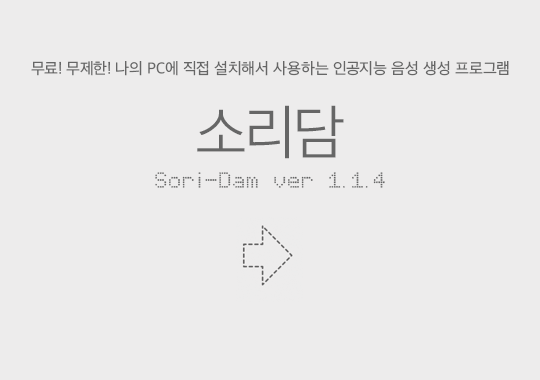
<style>
.page{position:relative;width:540px;height:380px;background:#edecec}
.page>*{position:absolute;margin:0}
.t1{font:16px "AppleSDGothicNeo-Regular";color:#666666}
.t2{font:60px "AppleSDGothicNeo-Light";color:#666666}
.t3{font:16px "Virtual-Pet-Sans";color:#666666}
</style>
<div class="page">
<p class="t1" style="left:31px;top:61px;width:478px;height:15px">무료! 무제한! 나의 PC에 직접 설치해서 사용하는 인공지능 음성 생성 프로그램</p>
<p class="t2" style="left:197px;top:105px;width:147px;height:54px">소리담</p>
<p class="t3" style="left:155px;top:172px;width:230px;height:16px">Sori-Dam ver 1.1.4</p>
</div>
